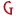
<style>
.page{position:relative;width:16px;height:16px;background:#ffffff}
.page>*{position:absolute;margin:0}
.t1{font:18.2px "EccentricStd";color:#ae131b;scale:1.54 1}
</style>
<div class="page">
<p class="t1" style="left:3px;top:0px;width:11px;height:15px">G</p>
</div>
